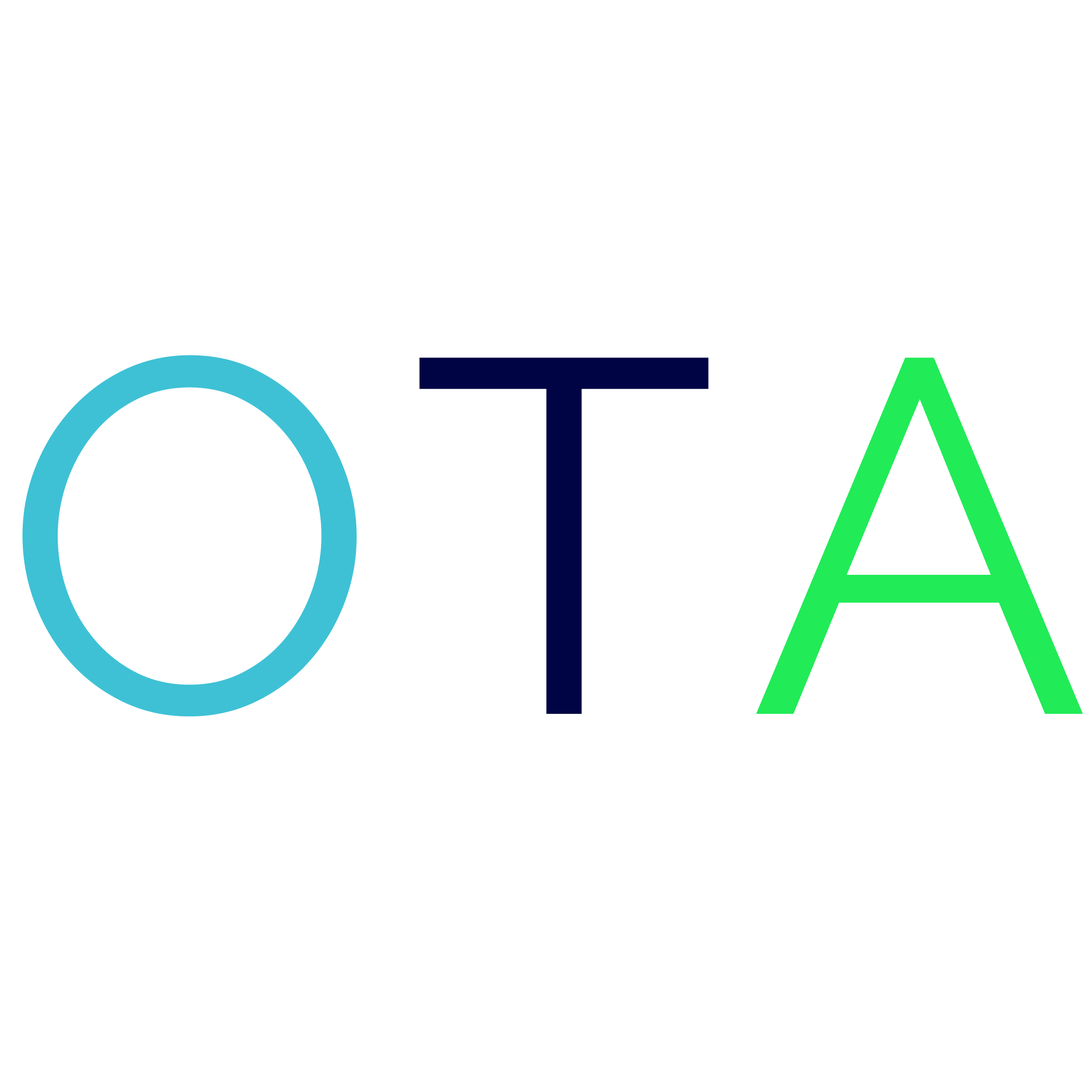
<style>
.page{position:relative;width:1092px;height:1092px;background:#ffffff}
.page>*{position:absolute;margin:0}
.t1{font:501.5px "Raleway";letter-spacing:0.06em;color:#3ec1d5}
.t2{font:501.5px "Raleway";letter-spacing:0.06em;color:#000444}
.t3{font:501.5px "Raleway";letter-spacing:0.06em;color:#21eb57}
</style>
<div class="page">
<p class="t1" style="left:22px;top:355px;width:1061px;height:361px">O<span class="t2">T</span><span class="t3">A</span></p>
</div>
